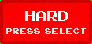
<style>
.page{position:relative;width:92px;height:44px;background:#ff0000}
.page>*{position:absolute;margin:0}
.t1{font:20px "ArcadeClassic";color:#ffffff}
.t2{font:12.4px "ArcadeClassic";color:#e6e6e6;scale:0.97 1}
</style>
<div class="page">
<p class="t1" style="left:25px;top:11px;width:43px;height:10px">HARD</p>
<p class="t2" style="left:6px;top:28px;width:80px;height:6px">press  select</p>
</div>
